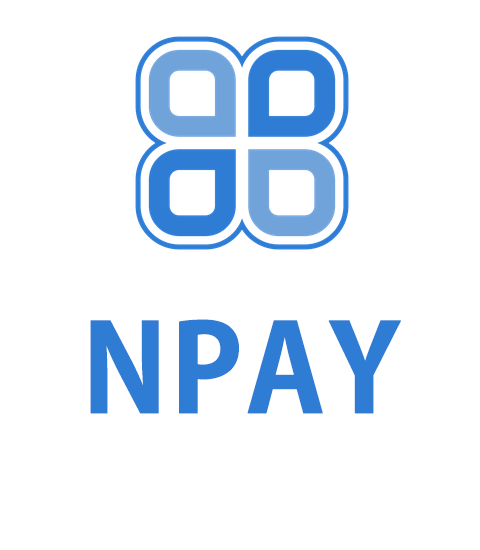
<style>
.page{position:relative;width:480px;height:550px;background:#ffffff}
.page>*{position:absolute;margin:0}
.t1{font:120px "AdobeGothicStd-Bold";color:#2e7cd4;font-weight:bold}
</style>
<div class="page">
<p class="t1" style="left:90px;top:319px;width:311px;height:95px">NPAY</p>
</div>
